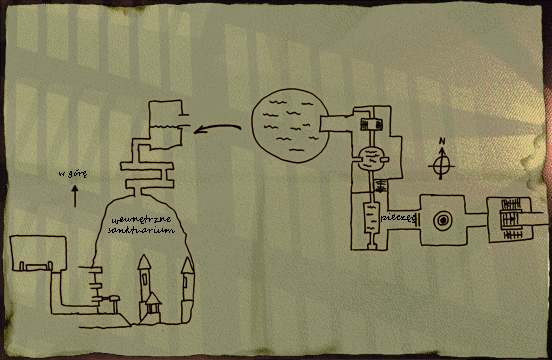
<style>
.page{position:relative;width:552px;height:360px;background:#8c8c6c}
.page>*{position:absolute;margin:0}
.t1{font:9px "SegoeScript";color:#000000}
</style>
<div class="page">
<p class="t1" style="left:59px;top:169px;width:28px;height:9px">w górę</p>
<p class="t1" style="left:108px;top:215px;width:67px;height:19px;text-align:center">wewnętrzne sanktuarium</p>
<p class="t1" style="left:381px;top:213px;width:36px;height:10px">pieczęć</p>
</div>
